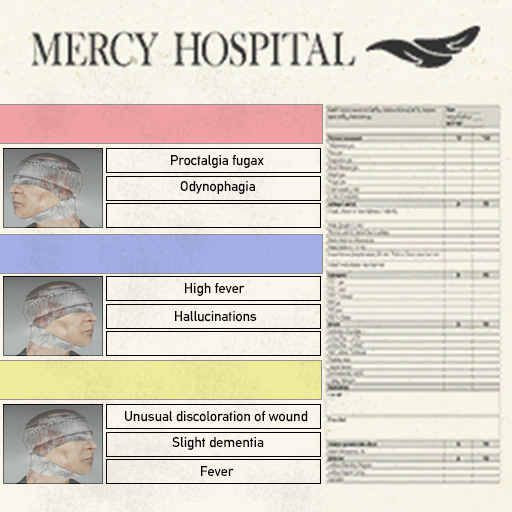
<style>
.page{position:relative;width:512px;height:512px}
.page>*{position:absolute;margin:0}
.t1{font:14px "AlteDIN1451Mittelschrift";color:#000000}
</style>
<div class="page">
<p class="t1" style="left:171px;top:155px;width:93px;height:13px">Proctalgia fugax</p>
<p class="t1" style="left:180px;top:181px;width:75px;height:13px">Odynophagia</p>
<p class="t1" style="left:185px;top:283px;width:60px;height:13px">High fever</p>
<p class="t1" style="left:175px;top:311px;width:82px;height:11px">Hallucinations</p>
<p class="t1" style="left:125px;top:411px;width:183px;height:11px">Unusual discoloration of wound</p>
<p class="t1" style="left:172px;top:437px;width:92px;height:13px">Slight dementia</p>
<p class="t1" style="left:201px;top:466px;width:33px;height:10px">Fever</p>
</div>
